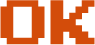
<style>
.page{position:relative;width:95px;height:45px;background:#d34c0a}
.page>*{position:absolute;margin:0}
.t1{font:50px "PressStartReg";color:#d34c0a}
</style>
<div class="page">
<p class="t1" style="left:0px;top:0px;width:95px;height:45px">OK</p>
</div>
